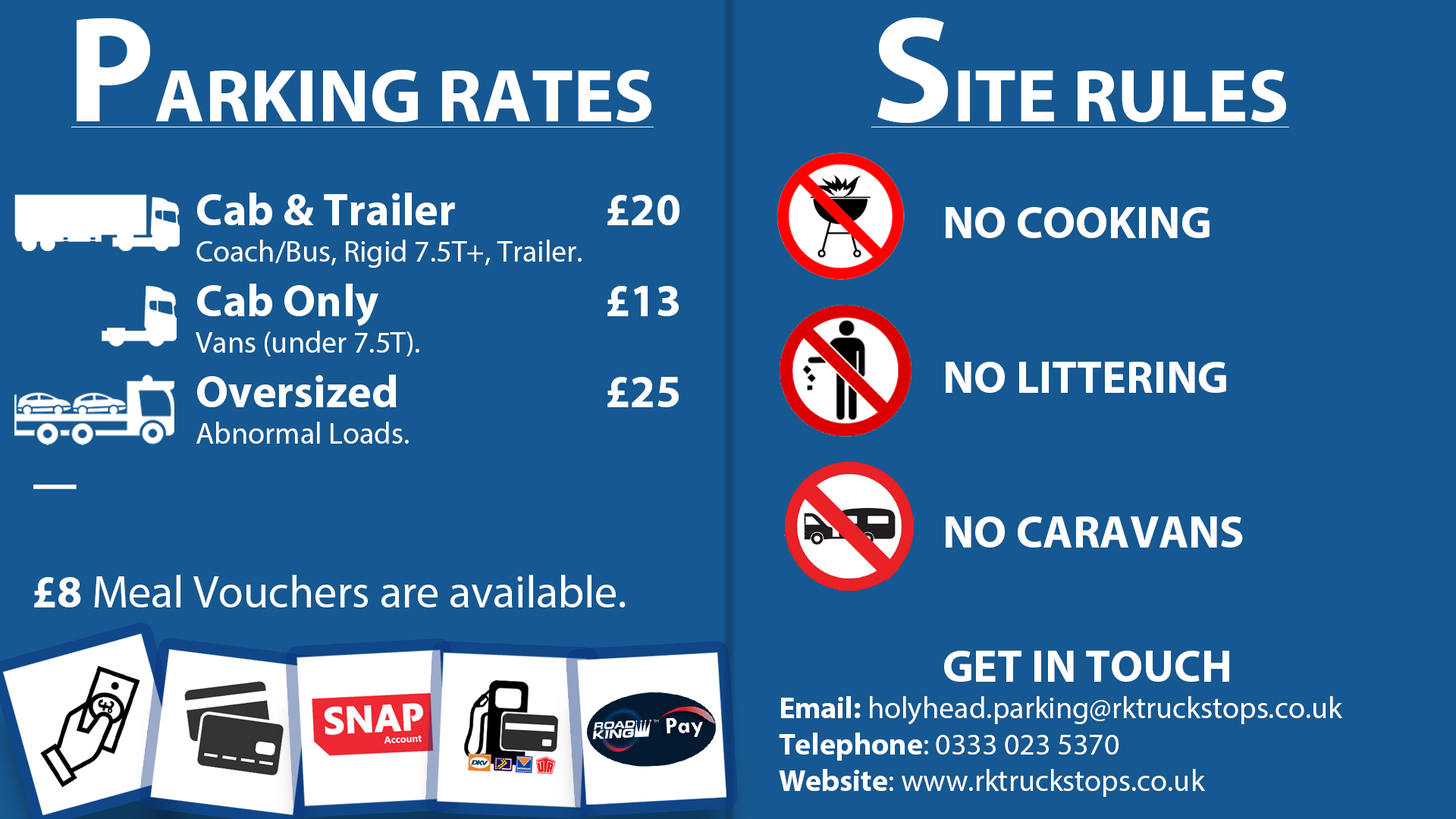
<style>
.page{position:relative;width:1456px;height:819px;background:#165891}
.page>*{position:absolute;margin:0}
.t1{font:75.8px "MyriadPro-Bold";color:#ffffff}
.t2{font:151.7px "MyriadPro-Bold";color:#ffffff}
.t3{font:30.3px "MyriadPro-Regular";color:#ffffff}
.t4{font:45.5px "MyriadPro-Bold";color:#ffffff}
.t5{font:45.5px "MyriadPro-Regular";color:#ffffff}
.t6{font:30.3px "MyriadPro-Bold";color:#ffffff}
</style>
<div class="page">
<p class="t1" style="left:877px;top:17px;width:409px;height:106px"><span class="t2">S</span>ITE RULES</p>
<p class="t1" style="left:77px;top:18px;width:574px;height:104px"><span class="t2">P</span>ARKING RATES</p>
<p class="t3" style="left:33px;top:193px;width:646px;height:414px"><span class="t4">      Cab &amp; Trailer      £20<br></span>      Coach/Bus, Rigid 7.5T+, Trailer.<br><span class="t4">      Cab Only         £13</span><br>      Vans (under 7.5T).<br><span class="t4">      Oversized        £25<br></span>      Abnormal Loads.<br><span class="t4">-<br><br>£8 </span><span class="t5">Meal Vouchers are available.</span></p>
<p class="t4" style="left:946px;top:207px;width:264px;height:31px">NO COOKING</p>
<p class="t4" style="left:946px;top:362px;width:280px;height:31px">NO LITTERING</p>
<p class="t4" style="left:946px;top:516px;width:297px;height:32px">NO CARAVANS</p>
<p class="t3" style="left:779px;top:651px;width:564px;height:146px"><span class="t4">      GET IN TOUCH<br></span><span class="t6">Email: </span>holyhead.parking@rktruckstops.co.uk<br><span class="t6">Telephone</span>: 0333 023 5370<br><span class="t6">Website</span>: www.rktruckstops.co.uk</p>
</div>
